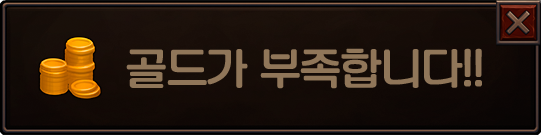
<style>
.page{position:relative;width:541px;height:135px}
.page>*{position:absolute;margin:0}
.t1{font:40.9px "KoreanNGL3-R";color:#907659}
</style>
<div class="page">
<p class="t1" style="left:126px;top:48px;width:356px;height:41px">골드가 부족합니다!!</p>
</div>
